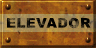
<style>
.page{position:relative;width:96px;height:48px}
.page>*{position:absolute;margin:0}
.t1{font:13.3px "Arial-Black";letter-spacing:0.045em;text-transform:uppercase}
</style>
<div class="page">
<p class="t1" style="left:7px;top:18px;width:84px;height:10px">ELEVADOR</p>
</div>
